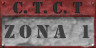
<style>
.page{position:relative;width:96px;height:48px}
.page>*{position:absolute;margin:0}
.t1{font:16.7px "Army";color:#303030;text-transform:uppercase}
.t2{font:19px "Army";letter-spacing:0.22em;color:#3f3f3f;text-transform:uppercase;scale:1.04 1}
</style>
<div class="page">
<p class="t1" style="left:13px;top:1px;width:70px;height:13px">c. t. c. t</p>
<p class="t2" style="left:4px;top:24px;width:85px;height:15px">zona 1</p>
</div>
